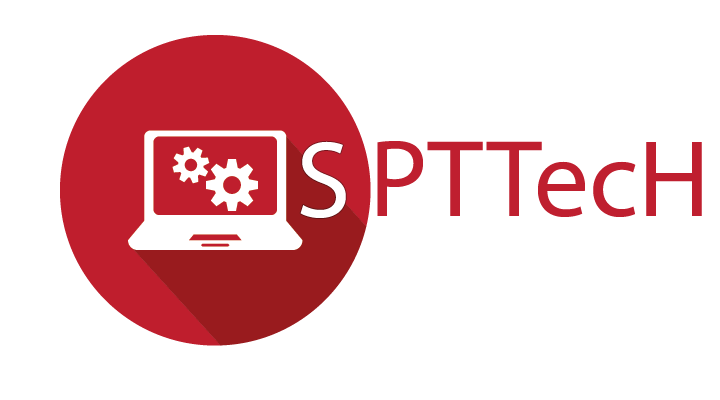
<style>
.page{position:relative;width:720px;height:400px;background:#ffffff}
.page>*{position:absolute;margin:0}
.t1{font:110px "MyriadPro-Regular";color:#ffffff}
.t2{font:110px "MyriadPro-Regular";color:#bf1f2f}
.t3{font:110px "MyriadPro-Regular";color:#c11717}
</style>
<div class="page">
<p class="t1" style="left:300px;top:141px;width:46px;height:77px">S</p>
<p class="t2" style="left:377px;top:141px;width:325px;height:76px"><span class="t3">  </span>  PTTecH</p>
</div>
